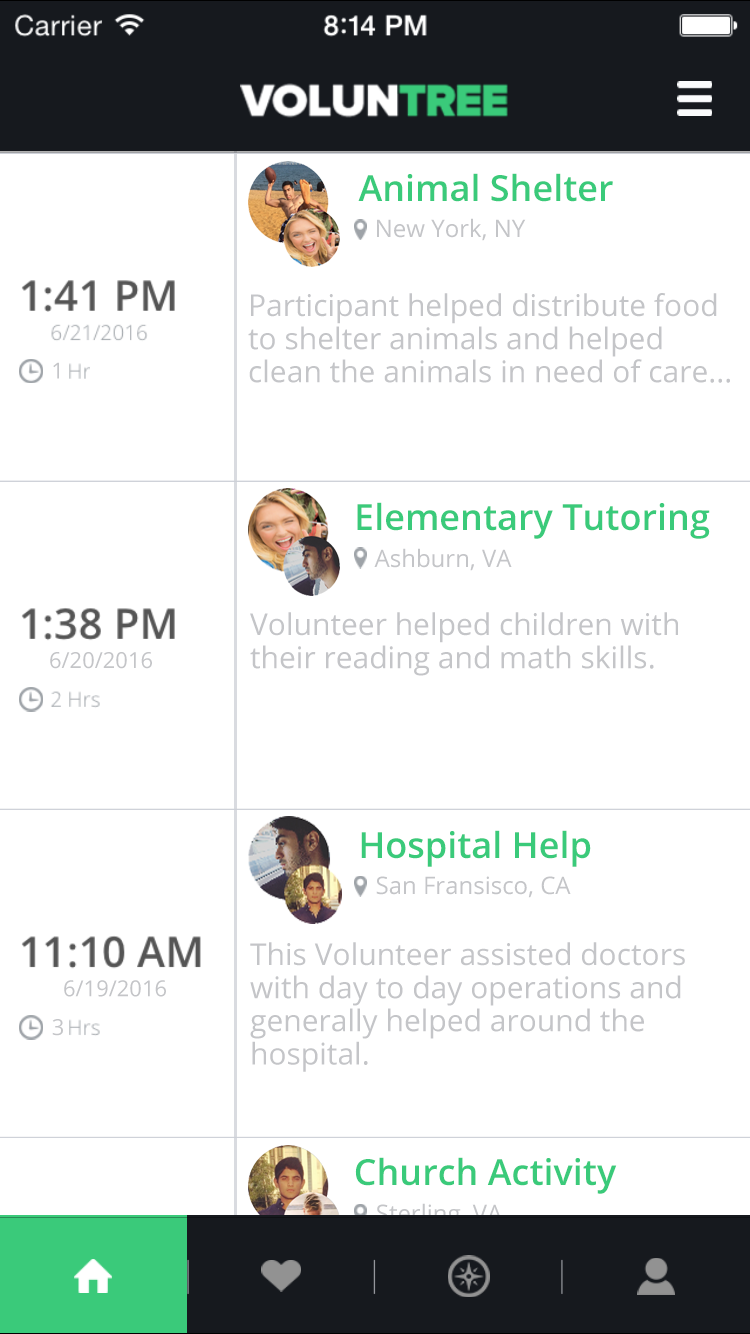
<style>
.page{position:relative;width:750px;height:1334px;background:#ffffff}
.page>*{position:absolute;margin:0}
.t1{font:36px "OpenSans-Semibold";color:#3aca7a}
.t2{font:24px "OpenSans";color:#c4c5c8}
.t3{font:30px/6.6px "OpenSans";color:#c4c5c8}
</style>
<div class="page">
<p class="t1" style="left:358px;top:173px;width:255px;height:29px">Animal Shelter</p>
<p class="t2" style="left:377px;top:218px;width:149px;height:23px">New York, NY</p>
<p class="t3" style="left:248px;top:293px;width:482px;height:90px">Participant helped distribute food<br><br><br><br><br>to shelter animals and helped <br><br><br><br><br>clean the animals in need of care...</p>
<p class="t1" style="left:357px;top:502px;width:353px;height:37px">Elementary Tutoring</p>
<p class="t2" style="left:374px;top:548px;width:138px;height:23px">Ashburn, VA</p>
<p class="t3" style="left:250px;top:612px;width:428px;height:64px">Volunteer helped children with <br><br><br><br><br>their reading and math skills.</p>
<p class="t1" style="left:361px;top:830px;width:230px;height:37px">Hospital Help</p>
<p class="t2" style="left:376px;top:876px;width:195px;height:22px">San Fransisco, CA</p>
<p class="t3" style="left:250px;top:942px;width:435px;height:130px">This Volunteer assisted doctors<br><br><br><br> <br>with day to day operations and <br><br><br><br><br>generally helped around the<br><br><br><br><br>hospital.</p>
<p class="t1" style="left:355px;top:1157px;width:262px;height:37px">Church Activity</p>
</div>
